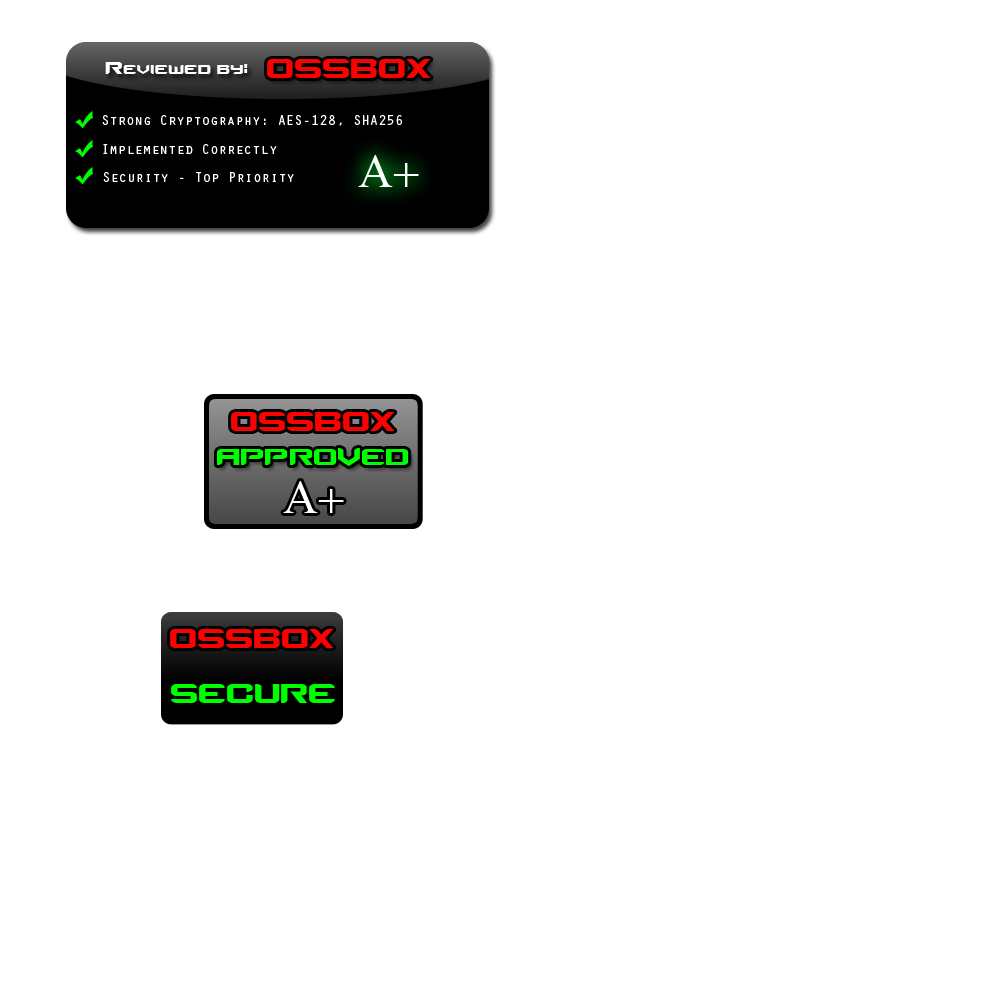
<style>
.page{position:relative;width:1000px;height:1000px;background:#ffffff}
.page>*{position:absolute;margin:0}
.t1{font:24px "Counter-StrikeRegular";color:#ffffff}
.t2{font:38px "Counter-StrikeRegular";color:#ff0000}
.t3{font:14px "OratorStd";color:#ffffff}
.t4{font:33px "Counter-StrikeRegular";color:#00ff00}
.t5{font:38px "Counter-StrikeRegular";color:#00ff00}
</style>
<div class="page">
<p class="t1" style="left:105px;top:62px;width:143px;height:12px">Reviewed by:</p>
<p class="t2" style="left:267px;top:59px;width:164px;height:19px">OSSBOX</p>
<p class="t3" style="left:102px;top:115px;width:300px;height:11px">Strong Cryptography: AES-128, SHA256</p>
<p class="t3" style="left:103px;top:144px;width:174px;height:10px">Implemented Correctly</p>
<p class="t3" style="left:103px;top:172px;width:191px;height:10px">Security - Top Priority</p>
<p class="t2" style="left:231px;top:412px;width:164px;height:19px">OSSBOX</p>
<p class="t4" style="left:217px;top:448px;width:192px;height:18px">APPROVED</p>
<p class="t2" style="left:170px;top:629px;width:164px;height:19px">OSSBOX</p>
<p class="t5" style="left:171px;top:684px;width:164px;height:19px">SECURE</p>
</div>
